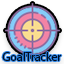
<style>
.page{position:relative;width:64px;height:64px}
.page>*{position:absolute;margin:0}
.t1{font:12px "MyriadPro-Regular";color:#010e22}
</style>
<div class="page">
<p class="t1" style="left:2px;top:52px;width:60px;height:9px">GoalTracker</p>
</div>
